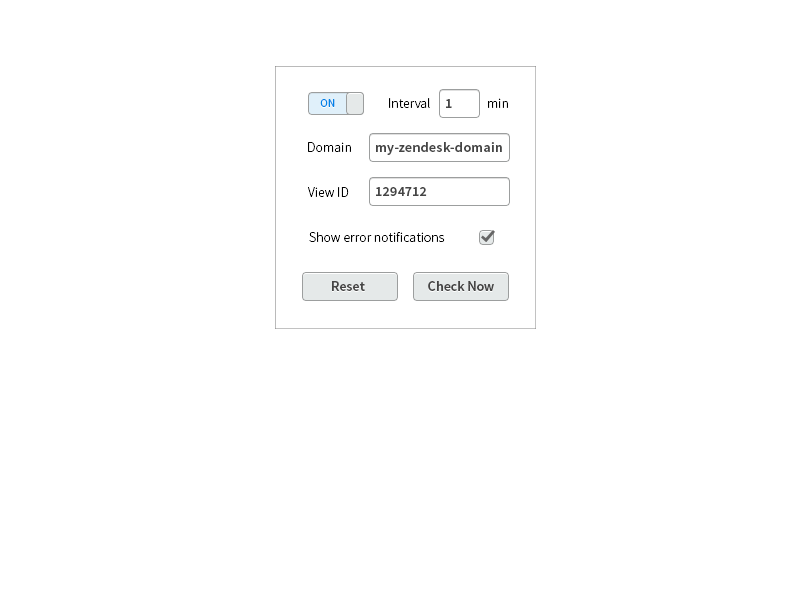
<style>
.page{position:relative;width:800px;height:600px;background:#ffffff}
.page>*{position:absolute;margin:0}
.t1{font:12px "SourceSansPro-Regular";color:#0083e8}
.t2{font:14px "SourceSansPro-Light";color:#000000}
.t3{font:14px "SourceSansPro-Semibold";letter-spacing:0.025em;color:#454545}
.t4{font:14px "SourceSansPro-Semibold";color:#454545}
</style>
<div class="page">
<p class="t1" style="left:320px;top:99px;width:15px;height:8px">ON</p>
<p class="t2" style="left:389px;top:98px;width:41px;height:10px">Interval</p>
<p class="t3" style="left:446px;top:99px;width:6px;height:9px">1</p>
<p class="t2" style="left:488px;top:98px;width:20px;height:10px">min</p>
<p class="t2" style="left:308px;top:142px;width:43px;height:10px">Domain</p>
<p class="t3" style="left:376px;top:142px;width:126px;height:13px">my-zendesk-domain</p>
<p class="t2" style="left:308px;top:187px;width:41px;height:10px">View ID</p>
<p class="t3" style="left:376px;top:187px;width:51px;height:9px">1294712</p>
<p class="t2" style="left:309px;top:232px;width:136px;height:10px">Show error notifications</p>
<p class="t4" style="left:332px;top:281px;width:33px;height:10px">Reset</p>
<p class="t4" style="left:428px;top:281px;width:66px;height:10px">Check Now</p>
</div>
